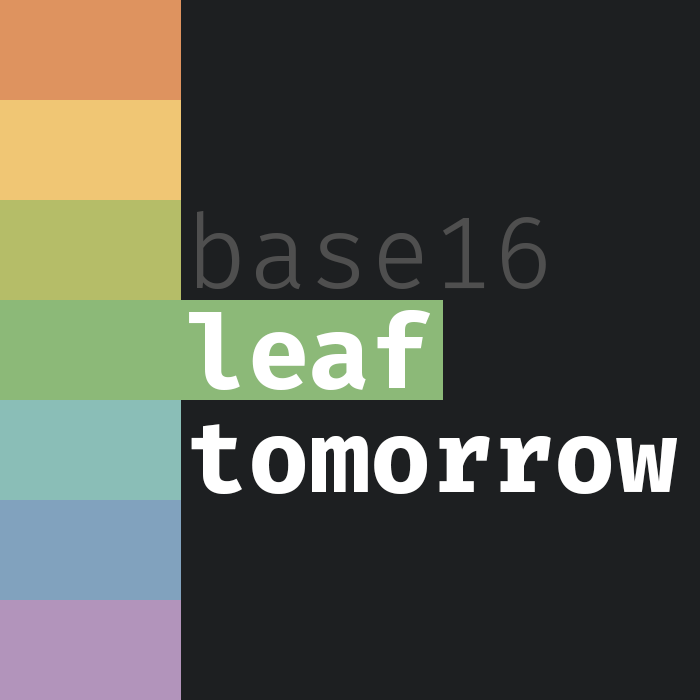
<style>
.page{position:relative;width:700px;height:700px;background:#1d1f21}
.page>*{position:absolute;margin:0}
.t1{font:102.2px "FiraCode-Light";color:#4f4f4f}
.t2{font:102.2px/103.6px "FiraCode-Bold";color:#ffffff}
</style>
<div class="page">
<p class="t1" style="left:197px;top:211px;width:349px;height:79px">base16</p>
<p class="t2" style="left:189px;top:310px;width:488px;height:184px">leaf<br>tomorrow</p>
</div>
